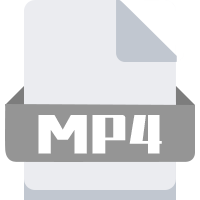
<style>
.page{position:relative;width:200px;height:200px;background:#ebecf0}
.page>*{position:absolute;margin:0}
.t1{font:42.1px "ZhenyanGB-Regular";letter-spacing:0.02em;color:#ffffff;scale:1.35 1}
</style>
<div class="page">
<p class="t1" style="left:38px;top:115px;width:124px;height:39px">MP4</p>
</div>
